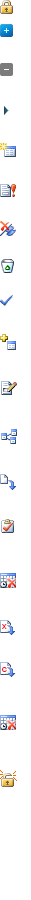
<style>
.page{position:relative;width:31px;height:900px;background:#ffffff}
.page>*{position:absolute;margin:0}
.t1{font:10px "ArialMT";color:#ff040a}
</style>
<div class="page">
<p class="t1" style="left:1px;top:624px;width:6px;height:5px">x</p>
<p class="t1" style="left:2px;top:667px;width:5px;height:5px">c</p>
</div>
